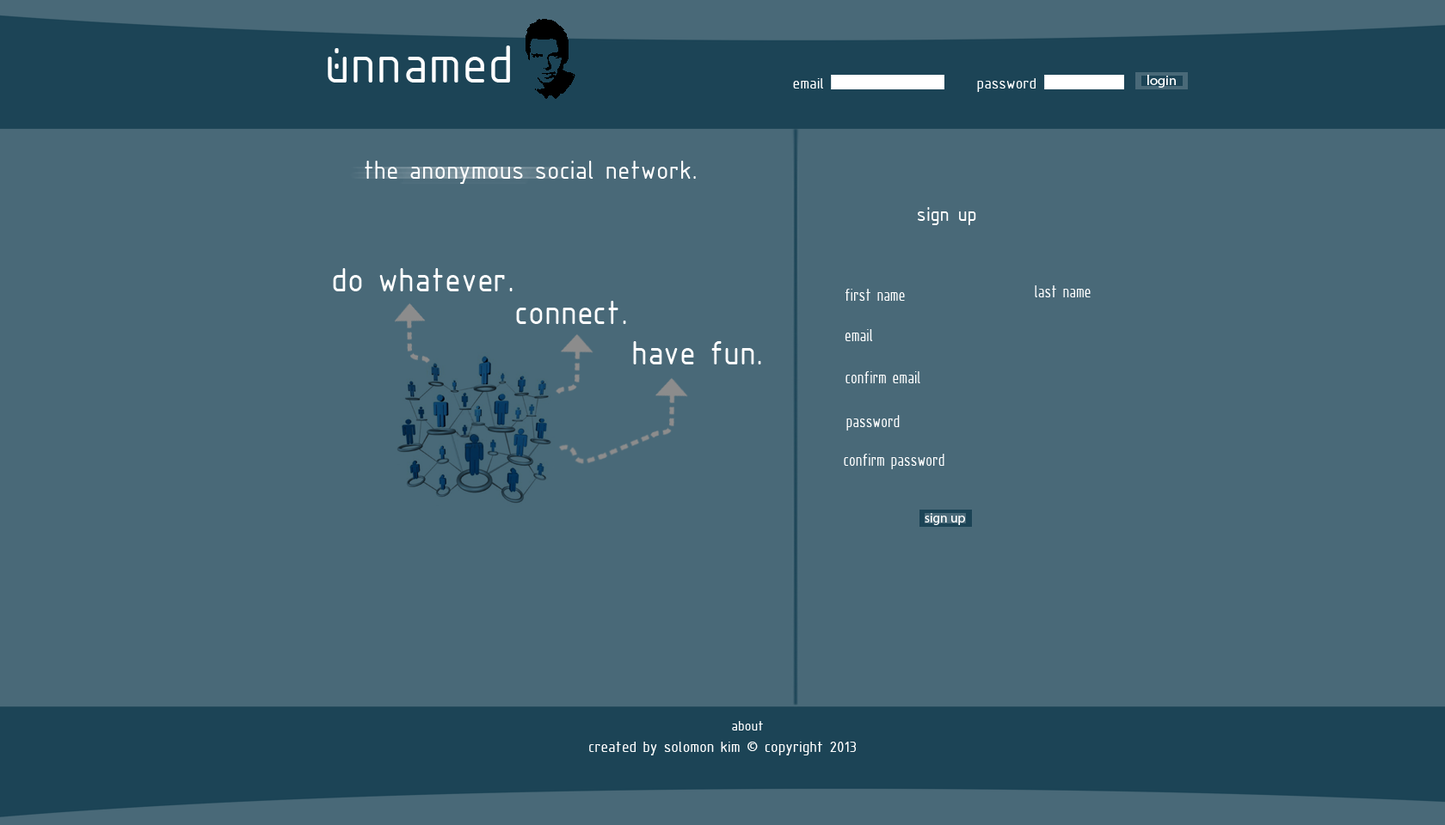
<style>
.page{position:relative;width:1445px;height:825px;background:#496978}
.page>*{position:absolute;margin:0}
.t1{font:57.8px "ISOCPEUR";color:#ffffff}
.t2{font:16.3px "ISOCPEUR";color:#ffffff}
.t3{font:27.4px "ISOCPEUR";color:#ffffff}
.t4{font:21.2px "ISOCPEUR";color:#ffffff}
.t5{font:35.9px "ISOCPEUR";color:#ffffff}
.t6{font:19.3px "ISOCPEUR";color:#ffffff;scale:0.76 1}
.t7{font:14.9px "ISOCPEUR";color:#ffffff}
</style>
<div class="page">
<p class="t1" style="left:328px;top:46px;width:182px;height:37px">unnamed</p>
<p class="t1" style="left:334px;top:48px;width:5px;height:21px">:</p>
<p class="t2" style="left:793px;top:78px;width:30px;height:11px">email</p>
<p class="t2" style="left:977px;top:78px;width:58px;height:14px">password</p>
<p class="t3" style="left:365px;top:161px;width:331px;height:23px">the anonymous social network.</p>
<p class="t4" style="left:917px;top:207px;width:59px;height:18px">sign up</p>
<p class="t5" style="left:333px;top:268px;width:179px;height:23px">do whatever.</p>
<p class="t6" style="left:844px;top:289px;width:61px;height:12px">first name</p>
<p class="t6" style="left:1034px;top:285px;width:56px;height:13px">last name</p>
<p class="t5" style="left:516px;top:301px;width:110px;height:23px">connect.</p>
<p class="t6" style="left:844px;top:329px;width:29px;height:12px">email</p>
<p class="t5" style="left:633px;top:341px;width:128px;height:24px">have fun.</p>
<p class="t6" style="left:845px;top:371px;width:75px;height:12px">confirm email</p>
<p class="t6" style="left:846px;top:415px;width:53px;height:16px">password</p>
<p class="t6" style="left:844px;top:454px;width:100px;height:15px">confirm password</p>
<p class="t7" style="left:732px;top:721px;width:31px;height:10px">about</p>
<p class="t2" style="left:589px;top:742px;width:267px;height:14px">created by solomon kim © copyright 2013</p>
</div>
